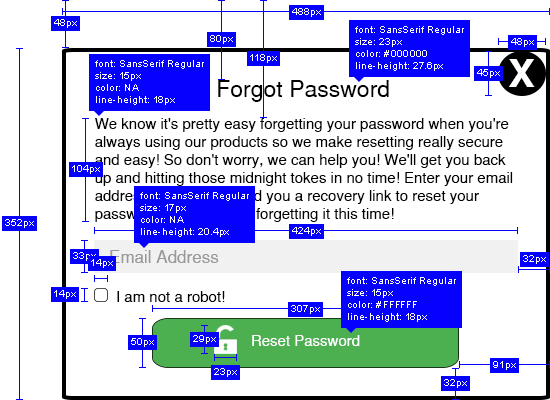
<style>
.page{position:relative;width:550px;height:400px;background:#ffffff}
.page>*{position:absolute;margin:0}
.t1{font:10px "ArialMT";color:#ffffff}
.t2{font:37.8px "SansSerifBold";color:#ffffff;scale:1.07 1}
.t3{font:23px "SansSerif";color:#000000}
.t4{font:15px "SansSerif";color:#000000}
.t5{font:17px "SansSerif";color:#999999}
.t6{font:15px "SansSerif";color:#ffffff}
</style>
<div class="page">
<p class="t1" style="left:292px;top:8px;width:29px;height:9px">488px</p>
<p class="t1" style="left:54px;top:19px;width:23px;height:9px">48px</p>
<p class="t1" style="left:355px;top:26px;width:109px;height:45px">font: SansSerif Regular<br>size: 23px<br>color: #000000<br>line-height: 27.6px</p>
<p class="t1" style="left:210px;top:35px;width:23px;height:9px">80px</p>
<p class="t1" style="left:511px;top:38px;width:23px;height:9px">48px</p>
<p class="t1" style="left:250px;top:54px;width:27px;height:9px">118px</p>
<p class="t1" style="left:95px;top:60px;width:109px;height:45px">font: SansSerif Regular<br>size: 15px<br>color: NA<br>line-height: 18px</p>
<p class="t2" style="left:509px;top:59px;width:26px;height:28px">X</p>
<p class="t1" style="left:477px;top:69px;width:23px;height:9px">45px</p>
<p class="t3" style="left:218px;top:80px;width:171px;height:22px">Forgot Password</p>
<p class="t4" style="left:95px;top:118px;width:418px;height:104px">We know it's pretty easy forgetting your password when you're<br>always using our products so we make resetting really secure<br>and easy! So don't worry, we can help you! We'll get you back<br>up and hitting those midnight tokes in no time! Enter your email <br>address and we will send you a recovery link to reset your <br>password. Just don't go forgetting it this time!</p>
<p class="t1" style="left:72px;top:165px;width:28px;height:9px">104px</p>
<p class="t1" style="left:140px;top:192px;width:109px;height:45px">font: SansSerif Regular<br>size: 17px<br>color: NA<br>line-height: 20.4px</p>
<p class="t1" style="left:5px;top:219px;width:29px;height:9px">352px</p>
<p class="t1" style="left:292px;top:227px;width:29px;height:9px">424px</p>
<p class="t1" style="left:73px;top:252px;width:23px;height:9px">33px</p>
<p class="t5" style="left:110px;top:250px;width:109px;height:13px">Email Address</p>
<p class="t1" style="left:523px;top:255px;width:23px;height:9px">32px</p>
<p class="t1" style="left:91px;top:259px;width:22px;height:9px">14px</p>
<p class="t1" style="left:347px;top:277px;width:109px;height:45px">font: SansSerif Regular<br>size: 15px<br>color: #FFFFFF<br>line-height: 18px</p>
<p class="t1" style="left:54px;top:290px;width:22px;height:9px">14px</p>
<p class="t4" style="left:117px;top:291px;width:108px;height:11px">I am not a robot!</p>
<p class="t1" style="left:291px;top:305px;width:29px;height:9px">307px</p>
<p class="t1" style="left:131px;top:338px;width:23px;height:9px">50px</p>
<p class="t1" style="left:193px;top:335px;width:23px;height:9px">29px</p>
<p class="t6" style="left:252px;top:335px;width:108px;height:11px">Reset Password</p>
<p class="t1" style="left:493px;top:361px;width:23px;height:9px">91px</p>
<p class="t1" style="left:214px;top:368px;width:23px;height:9px">23px</p>
<p class="t1" style="left:444px;top:379px;width:23px;height:9px">32px</p>
</div>
